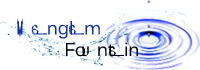
<style>
.page{position:relative;width:200px;height:70px;background:#ffffff}
.page>*{position:absolute;margin:0}
.t1{font:18px "Kalinga";color:#010006}
.t2{font:18px "Kalinga";color:#0630a9}
</style>
<div class="page">
<p class="t1" style="left:17px;top:18px;width:121px;height:39px;text-align:center"><span class="t2">Manglam<br>                 </span>Fountain</p>
</div>
